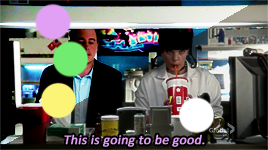
<style>
.page{position:relative;width:268px;height:150px}
.page>*{position:absolute;margin:0}
.t1{font:13.5px "Calibri";color:#e2a0f5;font-weight:bold;font-style:italic}
</style>
<div class="page">
<p class="t1" style="left:64px;top:134px;width:141px;height:13px">This is going to be good.</p>
</div>
